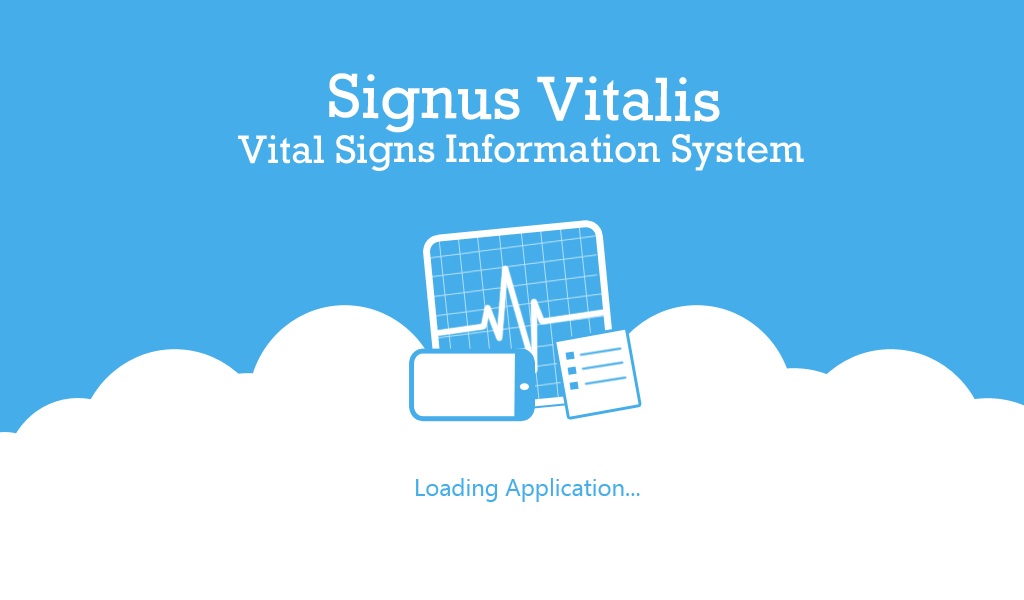
<style>
.page{position:relative;width:1024px;height:600px;background:#45aeea}
.page>*{position:absolute;margin:0}
.t1{font:63.9px "Rockwell";color:#ffffff}
.t2{font:40.6px "Rockwell";color:#ffffff}
.t3{font:23.9px "SegoeUI";color:#45aeea}
</style>
<div class="page">
<p class="t1" style="left:329px;top:73px;width:391px;height:60px;rotate:1deg">Signus Vitalis</p>
<p class="t2" style="left:238px;top:134px;width:566px;height:37px">Vital Signs Information System</p>
<p class="t3" style="left:416px;top:478px;width:224px;height:24px">Loading Application...</p>
</div>
